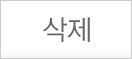
<style>
.page{position:relative;width:132px;height:59px;background:#ffffff}
.page>*{position:absolute;margin:0}
.t1{font:28px "YDVYGO32";color:#666666;scale:0.95 1}
</style>
<div class="page">
<p class="t1" style="left:43px;top:17px;width:47px;height:26px">삭제</p>
</div>
